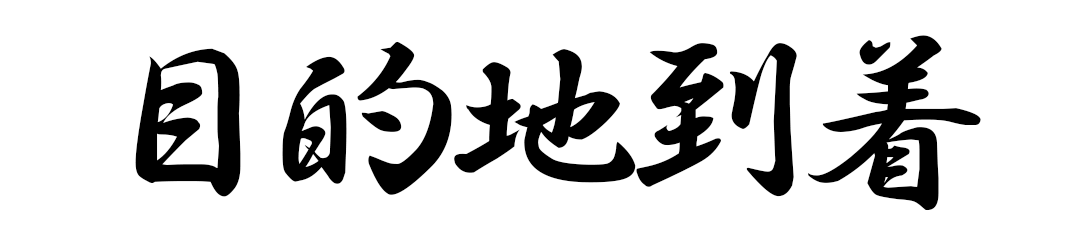
<style>
.page{position:relative;width:1080px;height:240px;background:#ffffff}
.page>*{position:absolute;margin:0}
.t1{font:195.8px "HGSGyoshotai";letter-spacing:-0.1em;color:#000000}
</style>
<div class="page">
<p class="t1" style="left:135px;top:35px;width:846px;height:176px">目的地到着</p>
</div>
